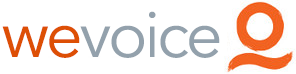
<style>
.page{position:relative;width:296px;height:74px;background:#ffffff}
.page>*{position:absolute;margin:0}
.t1{font:65px "AvenirLTStd-Book";letter-spacing:-0.04em;color:#93a1ac}
.t2{font:65px "AvenirLTStd-Book";letter-spacing:-0.04em;color:#dd4f05}
</style>
<div class="page">
<p class="t1" style="left:2px;top:11px;width:218px;height:47px"><span class="t2">we</span>voice</p>
</div>
